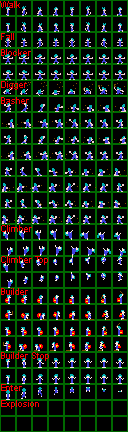
<style>
.page{position:relative;width:128px;height:432px;background:#000000}
.page>*{position:absolute;margin:0}
.t1{font:9px "ArialMT";color:#ff0000}
</style>
<div class="page">
<p class="t1" style="left:0px;top:1px;width:20px;height:7px">Walk</p>
<p class="t1" style="left:1px;top:33px;width:13px;height:7px">Fall</p>
<p class="t1" style="left:1px;top:49px;width:30px;height:7px">Blocker</p>
<p class="t1" style="left:1px;top:81px;width:26px;height:9px">Digger</p>
<p class="t1" style="left:1px;top:97px;width:28px;height:7px">Basher</p>
<p class="t1" style="left:1px;top:225px;width:31px;height:7px">Climber</p>
<p class="t1" style="left:1px;top:256px;width:47px;height:9px">Climber Top</p>
<p class="t1" style="left:1px;top:288px;width:27px;height:7px">Builder</p>
<p class="t1" style="left:1px;top:352px;width:48px;height:9px">Builder Stop</p>
<p class="t1" style="left:1px;top:384px;width:21px;height:7px">Enter</p>
<p class="t1" style="left:1px;top:400px;width:38px;height:9px">Explosion</p>
</div>
